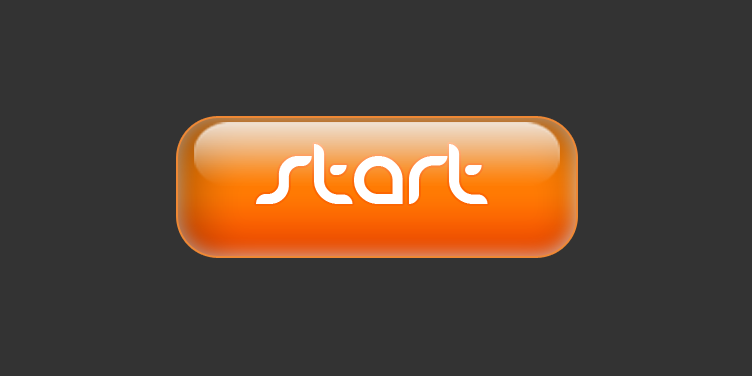
<style>
.page{position:relative;width:752px;height:376px;background:#333333}
.page>*{position:absolute;margin:0}
.t1{font:60px "Danube";color:#ffffff}
</style>
<div class="page">
<p class="t1" style="left:256px;top:144px;width:232px;height:60px">start</p>
</div>
